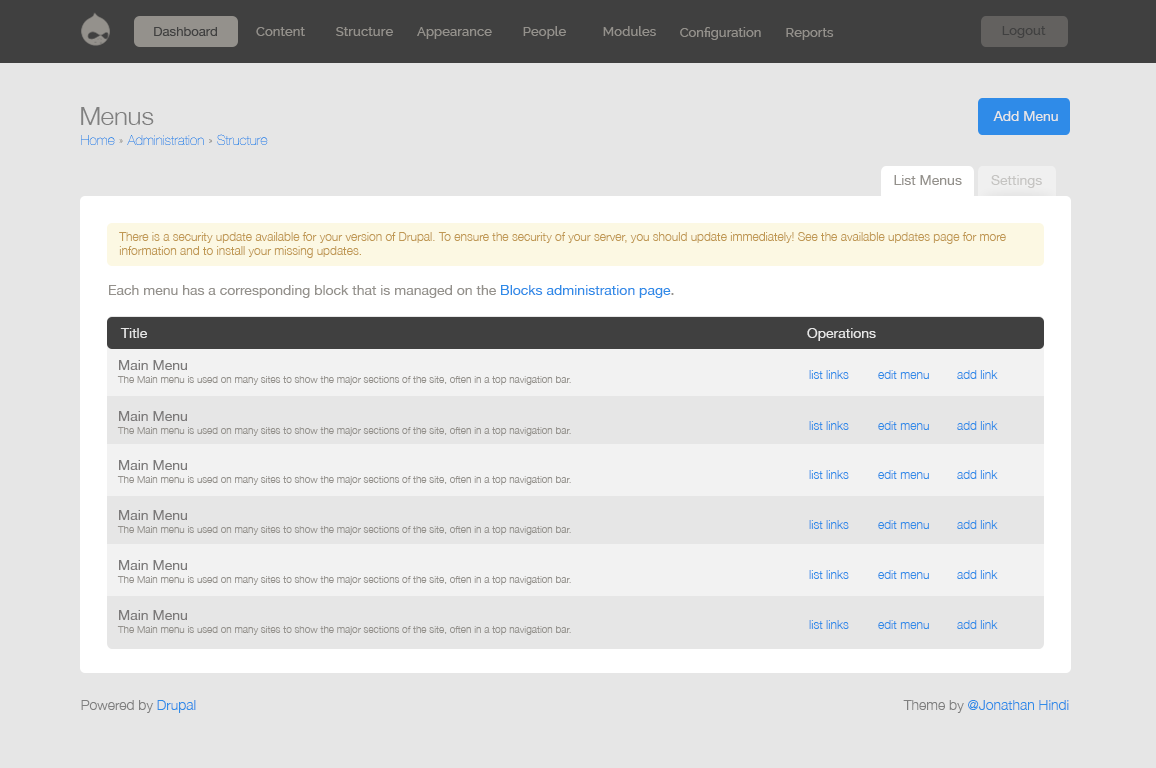
<style>
.page{position:relative;width:1156px;height:768px;background:#e6e6e6}
.page>*{position:absolute;margin:0}
.t1{font:12.7px "HelveticaNeue";color:#404040;scale:1.04 1}
.t2{font:12.7px "Raleway-Medium";color:#94918c;scale:1.04 1}
.t3{font:13px "Raleway-Medium";color:#94918c}
.t4{font:12.7px "Raleway-Medium";color:#404040;scale:1.04 1}
.t5{font:25.1px "HelveticaNeue-Light";color:#808080}
.t6{font:14px "HelveticaNeue";color:#e6e6e6}
.t7{font:14px "HelveticaNeue-UltraLight";color:#2f8be8}
.t8{font:14px "HelveticaNeue-UltraLight";color:#94918c}
.t9{font:14px "HelveticaNeue";color:#94918c}
.t10{font:14px "HelveticaNeue";color:#c5c4c2}
.t11{font:12px "HelveticaNeue-Light";color:#c09853}
.t12{font:14px "HelveticaNeue";color:#2f8be8}
.t13{font:14px "HelveticaNeue";color:#7b7979}
.t14{font:10px "HelveticaNeue-Light";color:#94918c}
.t15{font:12px "HelveticaNeue-Light";color:#2f8be8}
.t16{font:14px "HelveticaNeue-Light";color:#808080}
.t17{font:14px "HelveticaNeue-Light";color:#2f8be8}
</style>
<div class="page">
<p class="t1" style="left:154px;top:27px;width:63px;height:9px">Dashboard</p>
<p class="t2" style="left:256px;top:27px;width:49px;height:9px">Content</p>
<p class="t2" style="left:336px;top:27px;width:57px;height:9px">Structure</p>
<p class="t2" style="left:417px;top:27px;width:75px;height:12px">Appearance</p>
<p class="t2" style="left:523px;top:26px;width:43px;height:13px">People</p>
<p class="t2" style="left:603px;top:26px;width:53px;height:10px">Modules</p>
<p class="t3" style="left:680px;top:27px;width:81px;height:13px">Configuration</p>
<p class="t3" style="left:786px;top:28px;width:48px;height:12px">Reports</p>
<p class="t4" style="left:1002px;top:26px;width:44px;height:12px">Logout</p>
<p class="t5" style="left:81px;top:107px;width:73px;height:18px">Menus</p>
<p class="t6" style="left:993px;top:111px;width:65px;height:10px">Add Menu</p>
<p class="t7" style="left:81px;top:134px;width:187px;height:11px">Home <span class="t8">» </span>Administration <span class="t8">» </span>Structure</p>
<p class="t9" style="left:894px;top:175px;width:68px;height:10px">List Menus</p>
<p class="t10" style="left:991px;top:175px;width:51px;height:13px">Settings</p>
<p class="t11" style="left:119px;top:232px;width:887px;height:26px">There is a security update available for your version of Drupal. To ensure the security of your server, you should update immediately! See the available updates page for more <br>information and to install your missing updates.</p>
<p class="t9" style="left:109px;top:285px;width:565px;height:13px">Each menu has a corresponding block that is managed on the <span class="t12">Blocks administration page</span>.</p>
<p class="t6" style="left:120px;top:328px;width:27px;height:10px">Title</p>
<p class="t6" style="left:807px;top:328px;width:69px;height:13px">Operations</p>
<p class="t13" style="left:119px;top:360px;width:68px;height:10px">Main Menu</p>
<p class="t14" style="left:117px;top:376px;width:454px;height:9px">The Main menu is used on many sites to show the major sections of the site, often in a top navigation bar.</p>
<p class="t15" style="left:809px;top:370px;width:40px;height:9px">list links</p>
<p class="t15" style="left:878px;top:370px;width:51px;height:9px">edit menu</p>
<p class="t15" style="left:957px;top:370px;width:41px;height:9px">add link</p>
<p class="t13" style="left:119px;top:411px;width:68px;height:10px">Main Menu</p>
<p class="t15" style="left:809px;top:421px;width:40px;height:9px">list links</p>
<p class="t15" style="left:878px;top:421px;width:51px;height:9px">edit menu</p>
<p class="t15" style="left:957px;top:421px;width:41px;height:9px">add link</p>
<p class="t14" style="left:117px;top:427px;width:454px;height:9px">The Main menu is used on many sites to show the major sections of the site, often in a top navigation bar.</p>
<p class="t13" style="left:119px;top:460px;width:68px;height:10px">Main Menu</p>
<p class="t15" style="left:809px;top:470px;width:40px;height:9px">list links</p>
<p class="t15" style="left:878px;top:470px;width:51px;height:9px">edit menu</p>
<p class="t15" style="left:957px;top:470px;width:41px;height:9px">add link</p>
<p class="t14" style="left:117px;top:476px;width:454px;height:9px">The Main menu is used on many sites to show the major sections of the site, often in a top navigation bar.</p>
<p class="t13" style="left:119px;top:510px;width:68px;height:10px">Main Menu</p>
<p class="t15" style="left:809px;top:520px;width:40px;height:9px">list links</p>
<p class="t15" style="left:878px;top:520px;width:51px;height:9px">edit menu</p>
<p class="t15" style="left:957px;top:520px;width:41px;height:9px">add link</p>
<p class="t14" style="left:117px;top:526px;width:454px;height:9px">The Main menu is used on many sites to show the major sections of the site, often in a top navigation bar.</p>
<p class="t13" style="left:119px;top:560px;width:68px;height:10px">Main Menu</p>
<p class="t14" style="left:117px;top:576px;width:454px;height:9px">The Main menu is used on many sites to show the major sections of the site, often in a top navigation bar.</p>
<p class="t15" style="left:809px;top:570px;width:40px;height:9px">list links</p>
<p class="t15" style="left:878px;top:570px;width:51px;height:9px">edit menu</p>
<p class="t15" style="left:957px;top:570px;width:41px;height:9px">add link</p>
<p class="t13" style="left:119px;top:610px;width:68px;height:10px">Main Menu</p>
<p class="t14" style="left:117px;top:626px;width:454px;height:9px">The Main menu is used on many sites to show the major sections of the site, often in a top navigation bar.</p>
<p class="t15" style="left:809px;top:620px;width:40px;height:9px">list links</p>
<p class="t15" style="left:878px;top:620px;width:51px;height:9px">edit menu</p>
<p class="t15" style="left:957px;top:620px;width:41px;height:9px">add link</p>
<p class="t16" style="left:81px;top:700px;width:115px;height:13px">Powered by <span class="t17">Drupal</span></p>
<p class="t17" style="left:903px;top:700px;width:166px;height:13px"><span class="t16">Theme by </span>@Jonathan Hindi</p>
</div>
